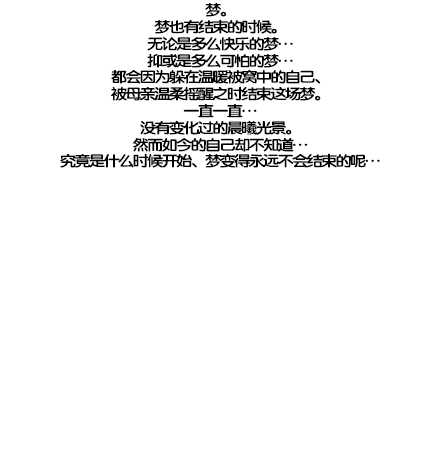
<style>
.page{position:relative;width:440px;height:476px;background:#ffffff}
.page>*{position:absolute;margin:0}
.t1{font:14.7px/16.8px "FZY4K--GBK1-0";letter-spacing:-0.13em;color:#000000;scale:1.14 1}
</style>
<div class="page">
<p class="t1" style="left:60px;top:3px;width:320px;height:165px;text-align:center">梦。<br>梦也有结束的时候。<br>无论是多么快乐的梦…<br>抑或是多么可怕的梦…<br>都会因为躲在温暖被窝中的自己、<br>被母亲温柔摇醒之时结束这场梦。<br>一直一直…<br>没有变化过的晨曦光景。<br>然而如今的自己却不知道…<br>究竟是什么时候开始、梦变得永远不会结束的呢…</p>
</div>
